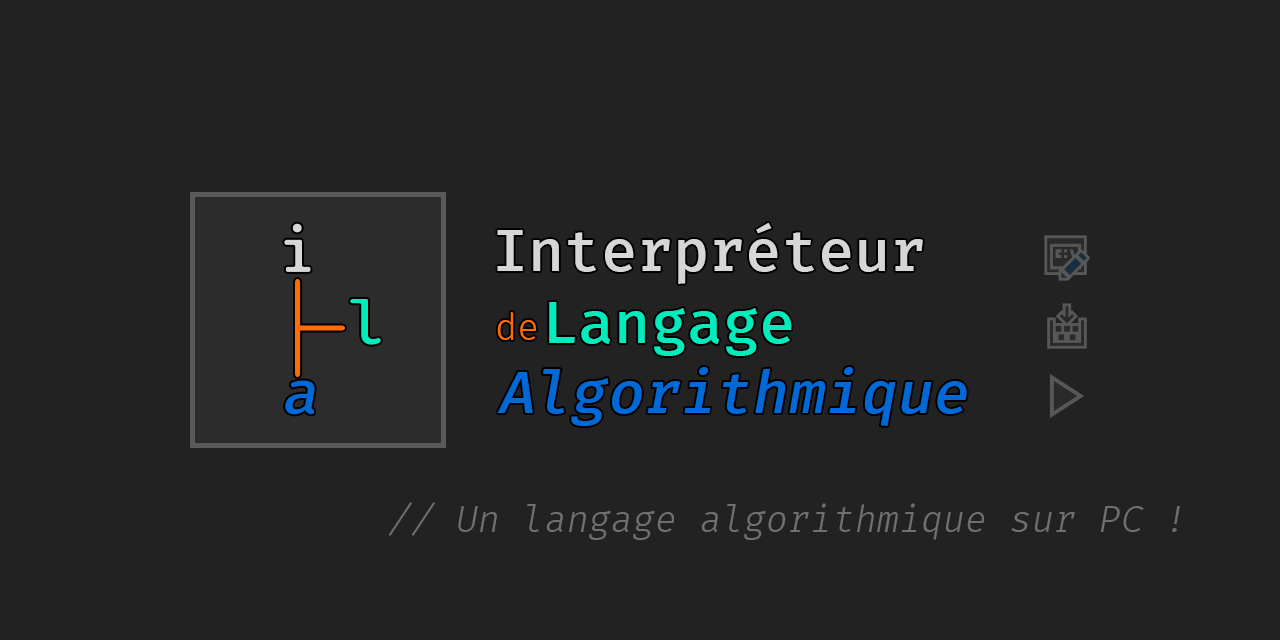
<style>
.page{position:relative;width:1280px;height:640px;background:#222222}
.page>*{position:absolute;margin:0}
.t1{font:58px "FiraCode-Medium";color:#d6d6d6}
.t2{font:58px "FiraCode-Medium";color:#00ecbd}
.t3{font:36px "FiraCode-Light";color:#ff6c00}
.t4{font:58px "FiraCode-Medium";color:#0069d5;font-style:italic}
.t5{font:36px "FiraCode-Light";color:#6f6f6f;font-style:italic}
</style>
<div class="page">
<p class="t1" style="left:497px;top:222px;width:426px;height:62px">Interpréteur</p>
<p class="t2" style="left:549px;top:302px;width:243px;height:54px">Langage</p>
<p class="t3" style="left:497px;top:312px;width:39px;height:28px">de</p>
<p class="t4" style="left:497px;top:367px;width:470px;height:59px">Algorithmique</p>
<p class="t5" style="left:388px;top:502px;width:792px;height:38px">// Un langage algorithmique sur PC !</p>
</div>
